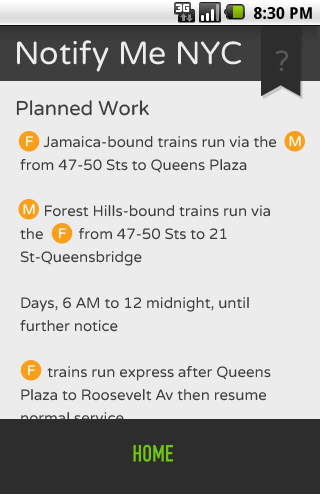
<style>
.page{position:relative;width:320px;height:494px;background:#ececec}
.page>*{position:absolute;margin:0}
.t1{font:16px "DroidSans-Bold";letter-spacing:0.005em;color:#000000}
.t2{font:32px "VarelaRound-Regular";color:#ececec}
.t3{font:29.1px "VarelaRound-Regular";color:#575757}
.t4{font:20px "VarelaRound-Regular";color:#3e3e3e}
.t5{font:15px/23px "VarelaRound-Regular";color:#3e3e3e}
.t6{font:13.7px "VarelaRound-Regular"}
.t7{font:13.7px "VarelaRound-Regular";color:#ffffff}
.t8{font:23px "DINEngschrift";color:#6ec610}
</style>
<div class="page">
<p class="t1" style="left:254px;top:7px;width:58px;height:12px">8:30 PM</p>
<p class="t2" style="left:17px;top:40px;width:224px;height:32px">Notify Me NYC</p>
<p class="t3" style="left:275px;top:50px;width:13px;height:21px">?</p>
<p class="t4" style="left:16px;top:100px;width:133px;height:16px">Planned Work</p>
<p class="t5" style="left:20px;top:136px;width:257px;height:288px">Jamaica-bound trains run via the  from 47-50 Sts to Queens Plaza<br><br>      Forest Hills-bound trains run via the         from 47-50 Sts to 21 St-Queensbridge <br><br>Days, 6 AM to 12 midnight, until <br>further notice <br><br>       trains run express after Queens Plaza to Roosevelt Av then resume normal service.</p>
<p class="t6" style="left:26px;top:136px;width:7px;height:11px">F</p>
<p class="t7" style="left:289px;top:136px;width:12px;height:11px">M</p>
<p class="t7" style="left:23px;top:204px;width:12px;height:11px">M</p>
<p class="t6" style="left:59px;top:228px;width:7px;height:11px">F</p>
<p class="t6" style="left:28px;top:365px;width:7px;height:11px">F</p>
<p class="t8" style="left:133px;top:444px;width:40px;height:18px">HOME</p>
</div>
